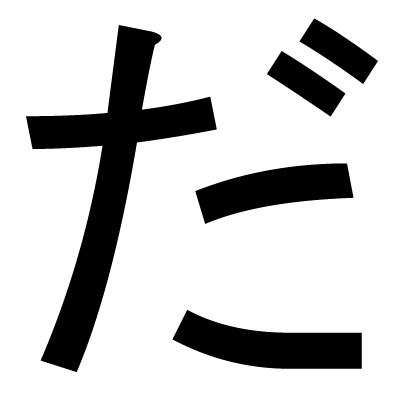
<style>
.page{position:relative;width:400px;height:400px;background:#ffffff}
.page>*{position:absolute;margin:0}
.t1{font:416.7px "MS-PGothic";color:#000000}
</style>
<div class="page">
<p class="t1" style="left:26px;top:18px;width:352px;height:354px">だ</p>
</div>
